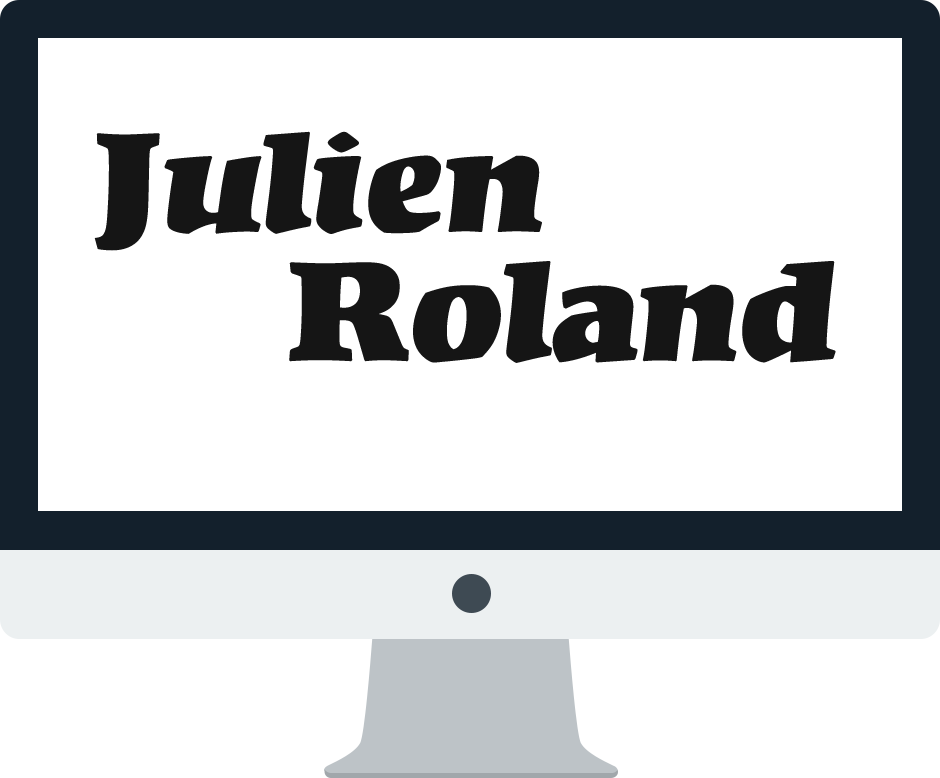
<style>
.page{position:relative;width:940px;height:778px;background:#ffffff}
.page>*{position:absolute;margin:0}
.t1{font:138.5px "Kompakt";color:#151515}
</style>
<div class="page">
<p class="t1" style="left:94px;top:131px;width:448px;height:120px">Julien</p>
<p class="t1" style="left:289px;top:261px;width:547px;height:102px">Roland</p>
</div>
